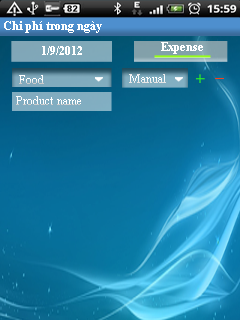
<style>
.page{position:relative;width:240px;height:320px}
.page>*{position:absolute;margin:0}
.t1{font:11.6px "TimesNewRomanPS-BoldMT";color:#ffffff}
.t2{font:11.6px "TimesNewRomanPSMT";color:#ffffff}
</style>
<div class="page">
<p class="t1" style="left:4px;top:21px;width:98px;height:12px">Chi phí trong ngày</p>
<p class="t1" style="left:42px;top:46px;width:40px;height:9px">1/9/2012</p>
<p class="t1" style="left:161px;top:42px;width:42px;height:12px">Expense</p>
<p class="t2" style="left:19px;top:75px;width:25px;height:9px">Food</p>
<p class="t2" style="left:129px;top:74px;width:37px;height:9px">Manual</p>
<p class="t2" style="left:16px;top:96px;width:65px;height:9px">Product name</p>
</div>
